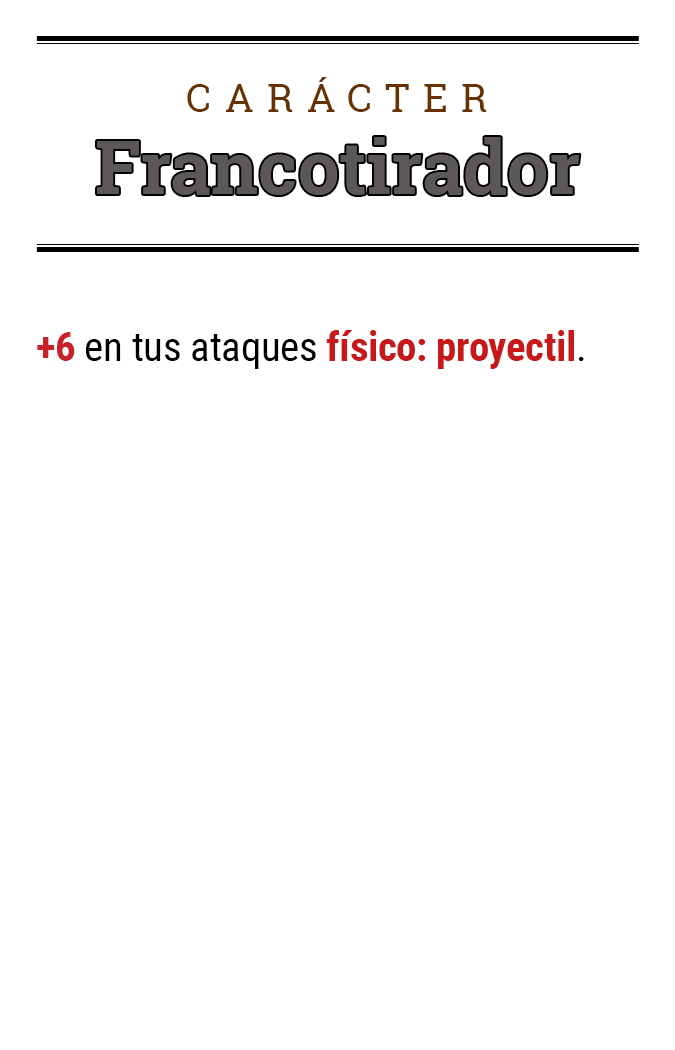
<style>
.page{position:relative;width:675px;height:1050px;background:#ffffff}
.page>*{position:absolute;margin:0}
.t1{font:39.2px "RobotoSlab-Regular";letter-spacing:0.34em;color:#663300}
.t2{font:74.5px "RobotoSlab-Bold";color:#5d5858}
.t3{font:41.1px "RobotoCondensed-Bold";letter-spacing:-0.01em;color:#c8191a}
.t4{font:41.1px "RobotoCondensed-Bold";letter-spacing:-0.01em;color:#c82127}
.t5{font:41.1px "RobotoCondensed-Regular";letter-spacing:-0.01em;color:#000000}
</style>
<div class="page">
<p class="t1" style="left:187px;top:77px;width:300px;height:35px">CARÁCTER</p>
<p class="t2" style="left:97px;top:137px;width:483px;height:58px">Francotirador</p>
<p class="t3" style="left:37px;top:330px;width:547px;height:39px"><span class="t4">+6</span><span class="t5"> en tus ataques </span>físico: proyectil<span class="t5">.</span></p>
</div>
